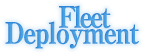
<style>
.page{position:relative;width:147px;height:55px;background:#ffffff}
.page>*{position:absolute;margin:0}
.t1{font:29px/16px "RyuminPro-ExBold";letter-spacing:-0.08em;color:#54aae4;font-weight:bold;scale:0.9 1}
.t2{font:29px/16px "RyuminPro-ExBold";letter-spacing:-0.12em;color:#54aae4;font-weight:bold;scale:0.9 1}
</style>
<div class="page">
<p class="t1" style="left:5px;top:5px;width:134px;height:44px;text-align:center"><span class="t2">      Fleet  <br></span>Deployment</p>
</div>
